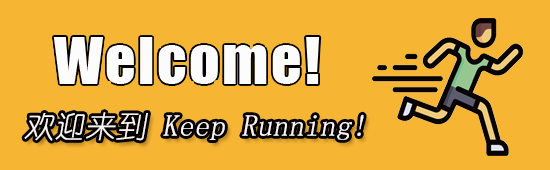
<style>
.page{position:relative;width:550px;height:170px;background:#f6b533}
.page>*{position:absolute;margin:0}
.t1{font:30px "YouYuan";letter-spacing:0.025em;color:#f9f3f2;font-style:italic}
</style>
<div class="page">
<p class="t1" style="left:24px;top:112px;width:340px;height:29px">欢迎来到 Keep Running!</p>
</div>
